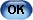
<style>
.page{position:relative;width:33px;height:20px}
.page>*{position:absolute;margin:0}
.t1{font:12px "Arial-BoldMT";color:#000003}
</style>
<div class="page">
<p class="t1" style="left:8px;top:5px;width:16px;height:9px">OK</p>
</div>
